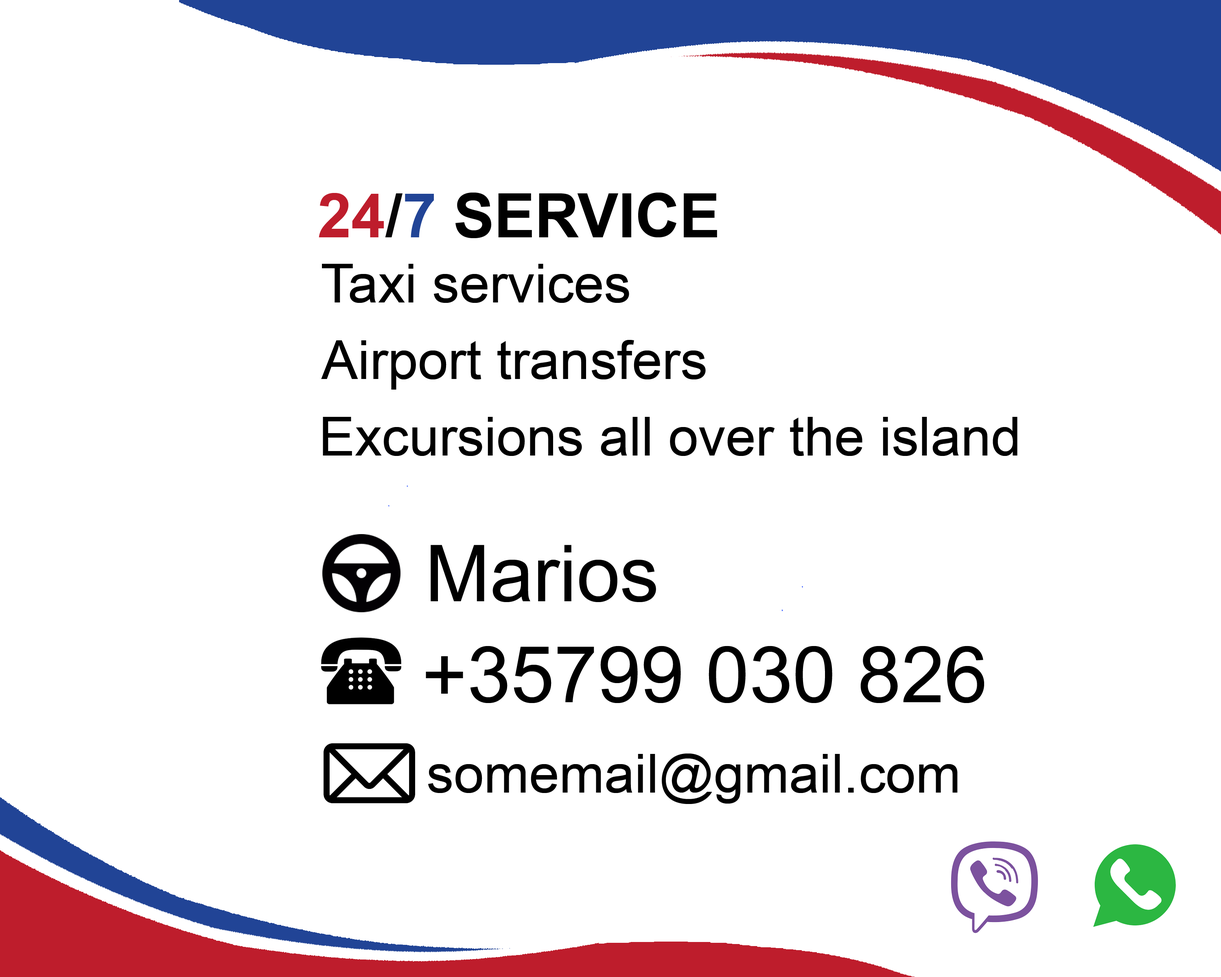
<style>
.page{position:relative;width:1221px;height:977px;background:#ffffff}
.page>*{position:absolute;margin:0}
.t1{font:61px "Arial-BoldMT";color:#000000}
.t2{font:61px "Arial-BoldMT";color:#be1d2c}
.t3{font:61px "Arial-BoldMT";color:#070607}
.t4{font:61px "Arial-BoldMT";color:#214496}
.t5{font:54.3px "ArialMT";color:#000000}
.t6{font:78px "ArialMT";color:#000000}
</style>
<div class="page">
<p class="t1" style="left:319px;top:192px;width:398px;height:46px"><span class="t2">24</span><span class="t3">/</span><span class="t4">7 </span>SERVICE</p>
<p class="t5" style="left:322px;top:264px;width:307px;height:39px">Taxi services</p>
<p class="t5" style="left:321px;top:340px;width:385px;height:49px">Airport transfers</p>
<p class="t5" style="left:323px;top:417px;width:694px;height:39px">Excursions all over the island</p>
<p class="t6" style="left:431px;top:545px;width:225px;height:57px">Marios</p>
<p class="t6" style="left:426px;top:645px;width:558px;height:58px">+35799 030 826</p>
<p class="t5" style="left:428px;top:753px;width:530px;height:51px">somemail@gmail.com</p>
</div>
